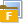
<style>
.page{position:relative;width:24px;height:24px;background:#f4b209}
.page>*{position:absolute;margin:0}
.t1{font:11px "SegoeUI-Bold";color:#fefeff;scale:1.2 1}
</style>
<div class="page">
<p class="t1" style="left:6px;top:12px;width:6px;height:8px">F</p>
</div>
